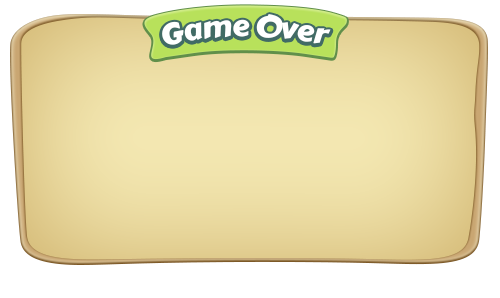
<style>
.page{position:relative;width:500px;height:298px;background:#ffffff}
.page>*{position:absolute;margin:0}
.t1{font:30px "CarterOne";letter-spacing:-0.02em;color:#ffffff}
</style>
<div class="page">
<p class="t1" style="left:162px;top:14px;width:169px;height:31px">Game Over</p>
</div>
